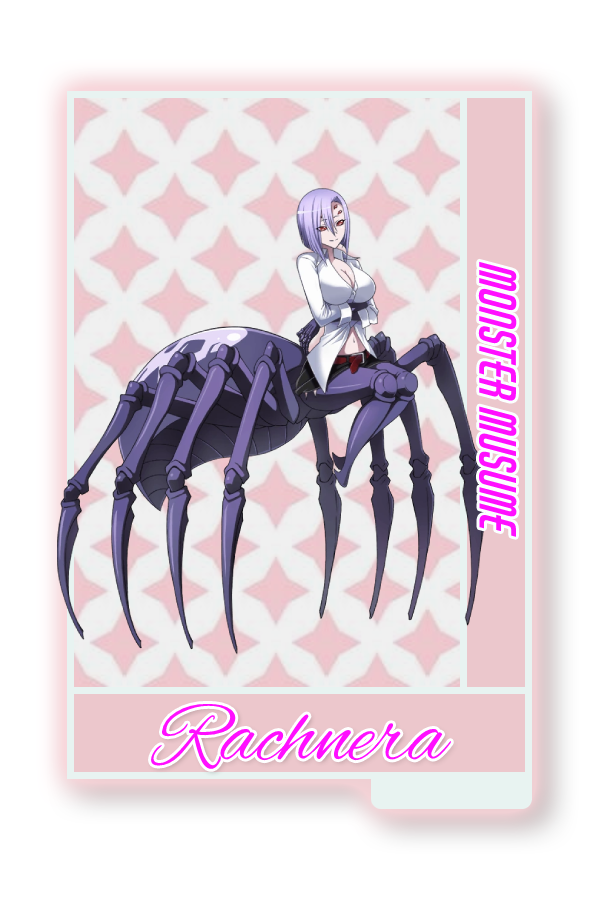
<style>
.page{position:relative;width:600px;height:900px;background:#ffffff}
.page>*{position:absolute;margin:0}
.t1{font:48.8px "AirAmerica-Regular";color:#ff0fff}
.t2{font:88.3px "AlexBrush-Regular";color:#ff0fff}
</style>
<div class="page">
<p class="t1" style="left:478px;top:261px;width:39px;height:276px;rotate:90deg">Monster Musume</p>
<p class="t2" style="left:151px;top:703px;width:301px;height:66px">Rachnera</p>
</div>
